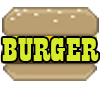
<style>
.page{position:relative;width:100px;height:100px;background:#ffffff}
.page>*{position:absolute;margin:0}
.t1{font:34.5px "Playbill";color:#d8eb29;scale:1.4 1}
</style>
<div class="page">
<p class="t1" style="left:2px;top:38px;width:97px;height:23px">BURGER</p>
</div>
